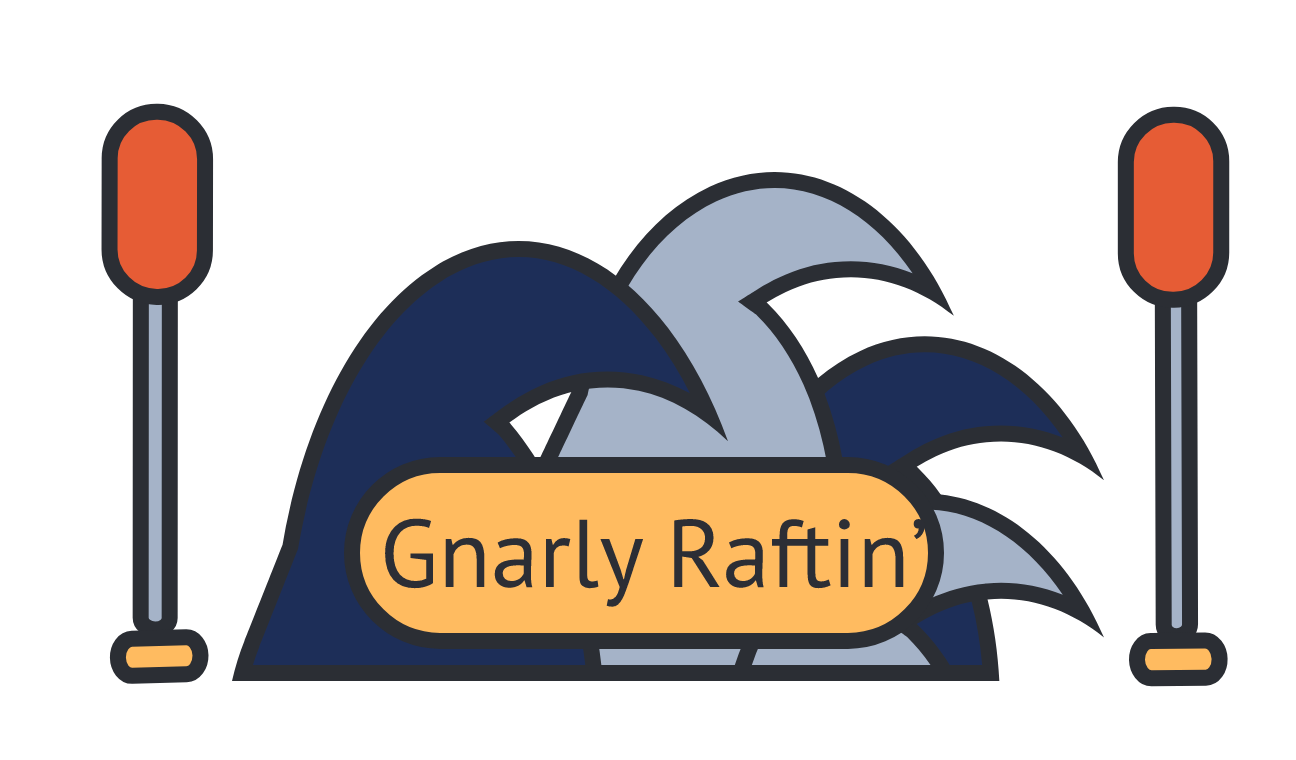
<style>
.page{position:relative;width:1296px;height:760px;background:#ffffff}
.page>*{position:absolute;margin:0}
.t1{font:96px "MyriadPro-Regular";color:#2c2e35}
</style>
<div class="page">
<p class="t1" style="left:385px;top:518px;width:540px;height:89px">Gnarly Raftin’</p>
</div>
